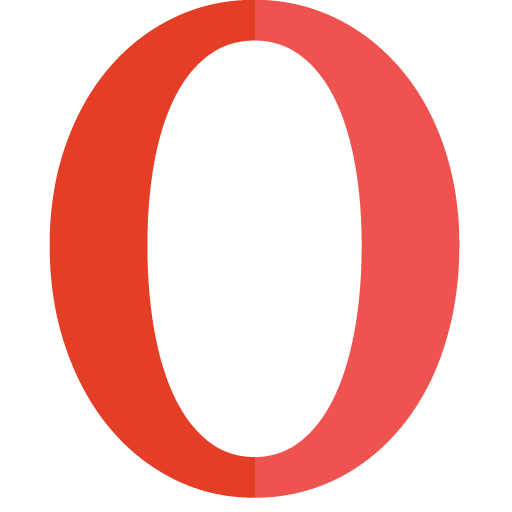
<style>
.page{position:relative;width:512px;height:512px;background:#ffffff}
.page>*{position:absolute;margin:0}
.t1{font:729.2px "TeluguMN-Bold";letter-spacing:-0.04em;scale:0.75 1}
</style>
<div class="page">
<p class="t1" style="left:49px;top:0px;width:411px;height:498px">O</p>
</div>
